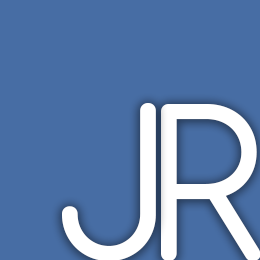
<style>
.page{position:relative;width:260px;height:260px;background:#476da4}
.page>*{position:absolute;margin:0}
.t1{font:200px "Comfortaa-Regular";color:#ffffff}
</style>
<div class="page">
<p class="t1" style="left:62px;top:103px;width:94px;height:158px">J</p>
<p class="t1" style="left:161px;top:104px;width:100px;height:157px">R</p>
</div>
